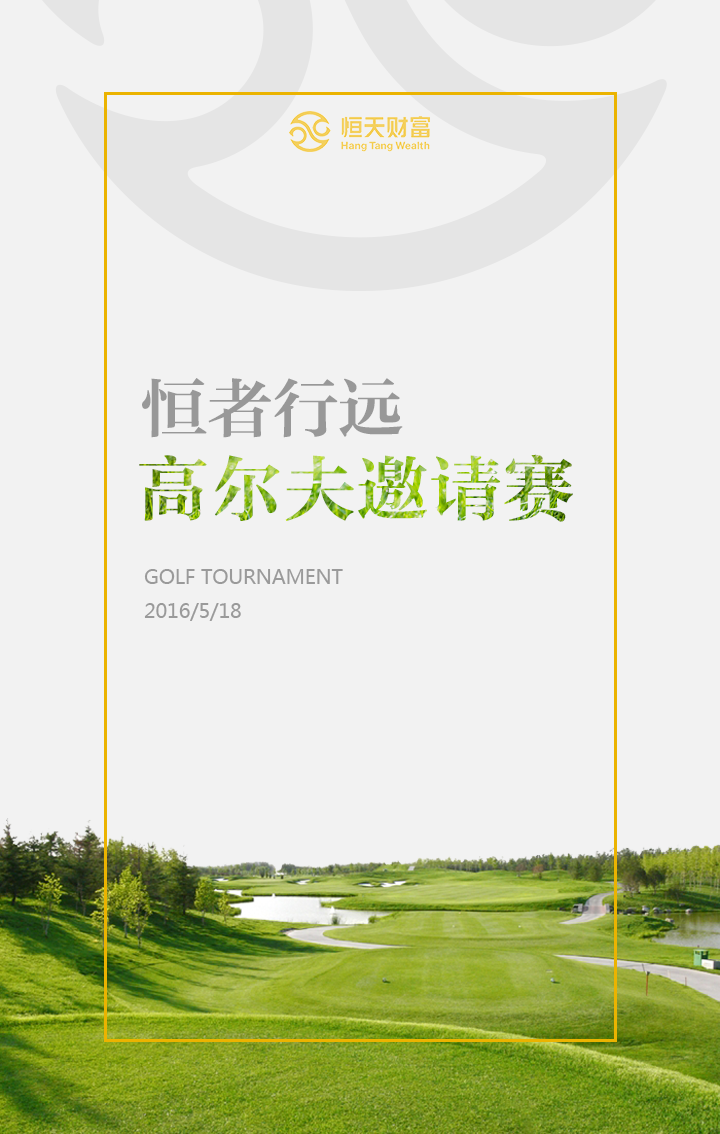
<style>
.page{position:relative;width:720px;height:1134px;background:#f2f2f2}
.page>*{position:absolute;margin:0}
.t1{font:65.7px "FZZYSK1--GBK1-0";color:#999999}
.t2{font:73.1px "FZZYSK1--GBK1-0"}
.t3{font:19.6px "MicrosoftYaHei";color:#9a9a9a}
</style>
<div class="page">
<p class="t1" style="left:142px;top:378px;width:261px;height:60px">恒者行远</p>
<p class="t2" style="left:139px;top:454px;width:434px;height:68px">高尔夫邀请赛</p>
<p class="t3" style="left:144px;top:569px;width:199px;height:52px">GOLF TOURNAMENT<br>2016/5/18</p>
</div>
